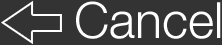
<style>
.page{position:relative;width:222px;height:45px;background:#333333}
.page>*{position:absolute;margin:0}
.t1{font:50px "HelveticaNeueLTCom-Lt";color:#ffffff}
</style>
<div class="page">
<p class="t1" style="left:76px;top:1px;width:145px;height:38px">Cancel</p>
</div>
